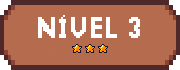
<style>
.page{position:relative;width:180px;height:70px;background:#b56c4e}
.page>*{position:absolute;margin:0}
.t1{font:30px "Pixellari";letter-spacing:-0.02em;color:#ffffff}
</style>
<div class="page">
<p class="t1" style="left:38px;top:15px;width:102px;height:23px">NÍVEL 3</p>
</div>
